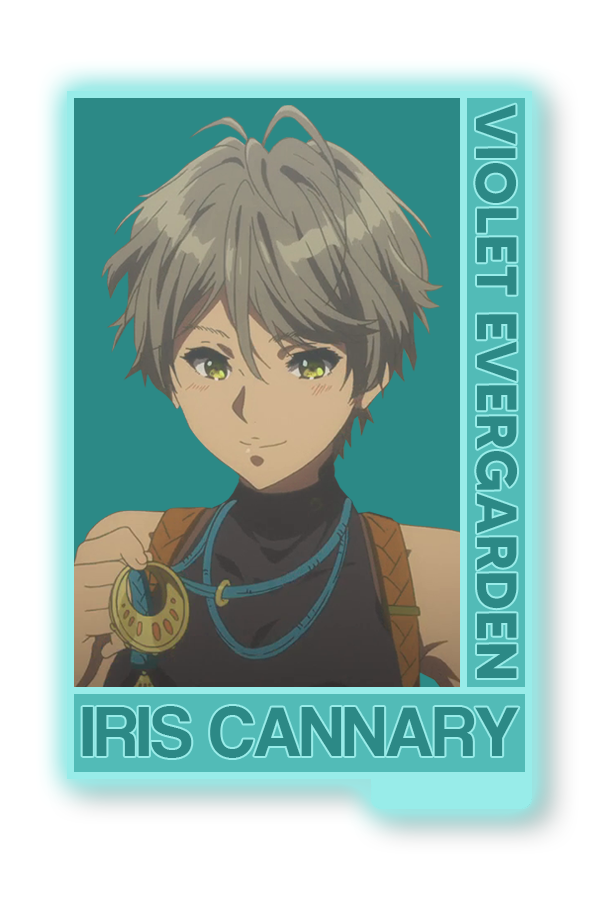
<style>
.page{position:relative;width:600px;height:900px;background:#ffffff}
.page>*{position:absolute;margin:0}
.t1{font:56.4px "MADETOMMY-Bold";color:#2c8986}
.t2{font:72.7px "CoolveticaRg-Regular";color:#2c8986}
</style>
<div class="page">
<p class="t1" style="left:475px;top:104px;width:43px;height:574px;rotate:90deg">VIOLET EVERGARDEN</p>
<p class="t2" style="left:82px;top:706px;width:437px;height:52px">IRIS CANNARY</p>
</div>
